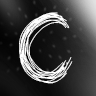
<style>
.page{position:relative;width:96px;height:96px}
.page>*{position:absolute;margin:0}
.t1{font:94.1px "Cheveuxdange";color:#ffffff;scale:0.95 1}
</style>
<div class="page">
<p class="t1" style="left:19px;top:12px;width:54px;height:72px">C</p>
</div>
